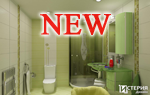
<style>
.page{position:relative;width:150px;height:95px}
.page>*{position:absolute;margin:0}
.t1{font:30px "TimesNewRomanPSMT";color:#ea1e14;font-weight:bold}
</style>
<div class="page">
<p class="t1" style="left:40px;top:14px;width:71px;height:21px">NEW</p>
</div>
